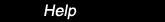
<style>
.page{position:relative;width:165px;height:22px;background:#000000}
.page>*{position:absolute;margin:0}
.t1{font:16px "ArialMT";color:#ffffff;font-style:italic}
</style>
<div class="page">
<p class="t1" style="left:44px;top:4px;width:33px;height:16px">Help</p>
</div>
